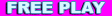
<style>
.page{position:relative;width:112px;height:16px;background:#ff00ff}
.page>*{position:absolute;margin:0}
.t1{font:14.7px "Arial-Black";color:#d6f7ff;scale:1.1 1}
</style>
<div class="page">
<p class="t1" style="left:7px;top:2px;width:98px;height:11px">FREE PLAY</p>
</div>
